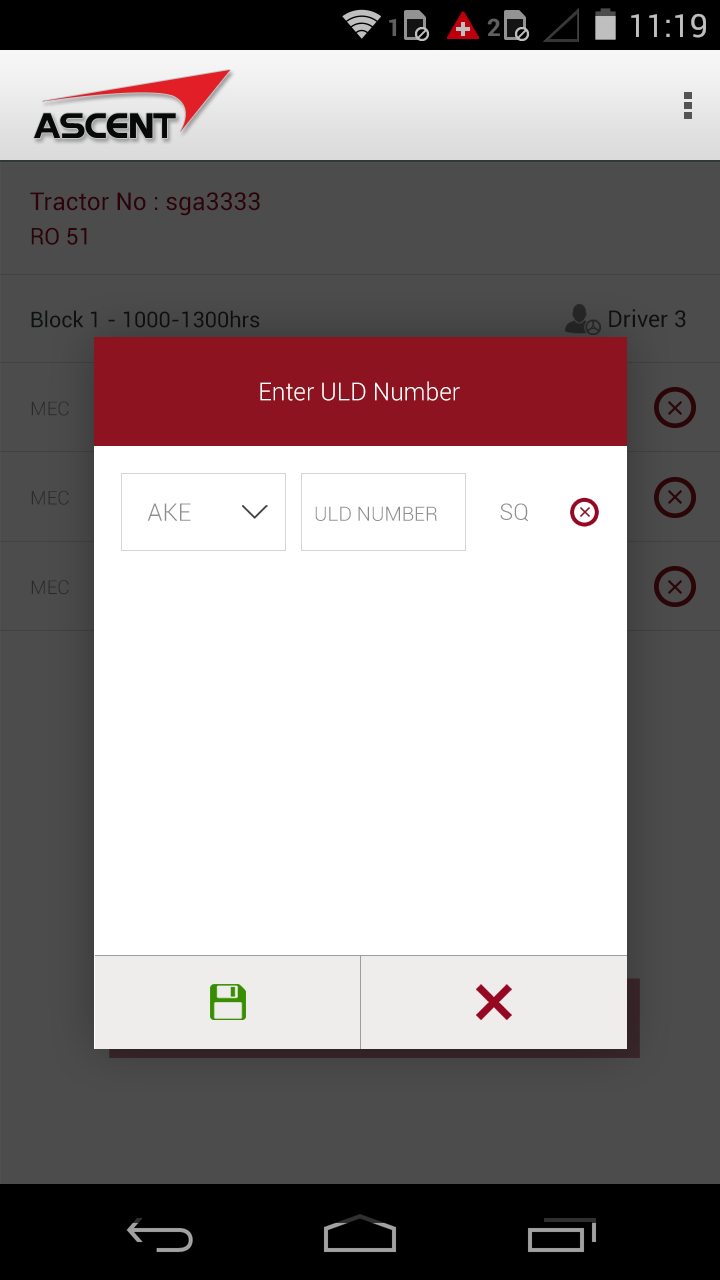
<style>
.page{position:relative;width:720px;height:1280px;background:#ffffff}
.page>*{position:absolute;margin:0}
.t1{font:24.6px "Roboto-Regular";color:#2d020a}
.t2{font:23px "Roboto-Regular";color:#2d020a}
.t3{font:21.7px "Roboto-Regular";color:#0d1010}
.t4{font:23px "Roboto-Regular";color:#0e1111}
.t5{font:24.6px "Roboto-Light";color:#ffffff}
.t6{font:19px "Roboto-Light";color:#2a2a2a}
.t7{font:24.6px "Roboto-Light";color:#8e8e8e}
.t8{font:19.8px "Roboto-Light";color:#8e8e8e}
.t9{font:22.5px "Roboto-Light";color:#8e8e8e}
</style>
<div class="page">
<p class="t1" style="left:30px;top:192px;width:230px;height:24px">Tractor No : sga3333</p>
<p class="t2" style="left:31px;top:227px;width:56px;height:18px">RO 51</p>
<p class="t3" style="left:31px;top:310px;width:229px;height:18px">Block 1 - 1000-1300hrs</p>
<p class="t4" style="left:609px;top:309px;width:77px;height:19px">Driver 3</p>
<p class="t5" style="left:260px;top:381px;width:200px;height:20px">Enter ULD Number</p>
<p class="t6" style="left:31px;top:401px;width:38px;height:15px">MEC</p>
<p class="t6" style="left:31px;top:490px;width:38px;height:15px">MEC</p>
<p class="t7" style="left:147px;top:503px;width:44px;height:18px">AKE</p>
<p class="t8" style="left:315px;top:506px;width:122px;height:15px">ULD NUMBER</p>
<p class="t9" style="left:500px;top:503px;width:28px;height:19px">SQ</p>
<p class="t6" style="left:31px;top:580px;width:38px;height:15px">MEC</p>
</div>
